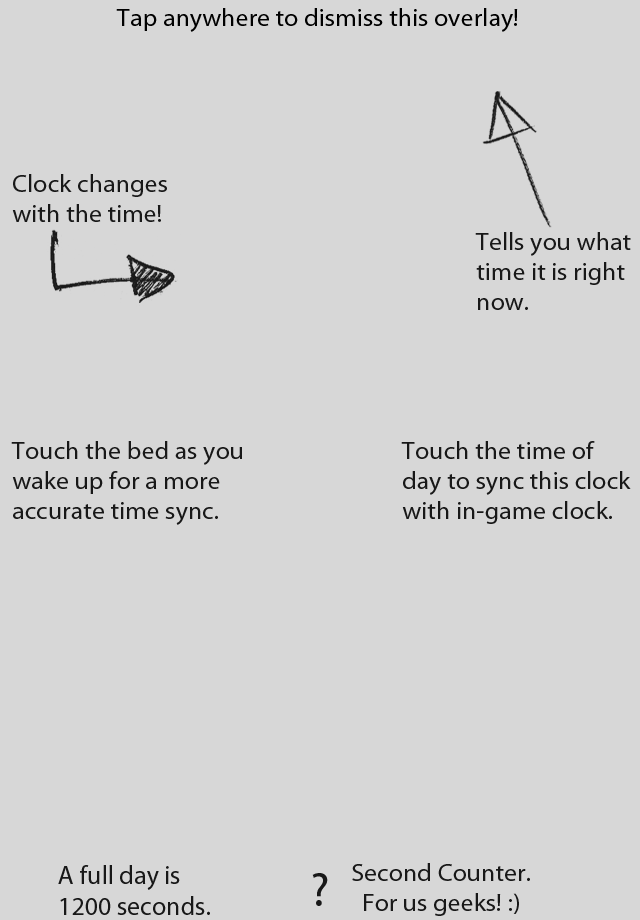
<style>
.page{position:relative;width:640px;height:920px;background:#d7d7d7}
.page>*{position:absolute;margin:0}
.t1{font:25px "MyriadPro-Regular";color:#000000;scale:1.04 1}
.t2{font:25px "MyriadPro-Regular";color:#181818;scale:1.04 1}
.t3{font:26px "MyriadPro-Regular";color:#181818}
.t4{font:48px "MyriadPro-Regular";color:#181818}
</style>
<div class="page">
<p class="t1" style="left:116px;top:8px;width:402px;height:24px">Tap anywhere to dismiss this overlay!</p>
<p class="t2" style="left:12px;top:174px;width:155px;height:48px">Clock changes<br>with the time!</p>
<p class="t2" style="left:475px;top:232px;width:156px;height:78px">Tells you what<br>time it is right<br>now.</p>
<p class="t2" style="left:11px;top:441px;width:231px;height:84px">Touch the bed as you<br>wake up for a more <br>accurate time sync.</p>
<p class="t2" style="left:401px;top:441px;width:230px;height:83px">Touch the time of<br>day to sync this clock<br>with in-game clock.</p>
<p class="t3" style="left:58px;top:865px;width:152px;height:50px">A full day is<br>1200 seconds.</p>
<p class="t2" style="left:352px;top:863px;width:178px;height:53px;text-align:center">Second Counter.<br>For us geeks! :)</p>
<p class="t4" style="left:312px;top:873px;width:16px;height:33px">?</p>
</div>
